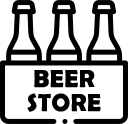
<style>
.page{position:relative;width:128px;height:124px;background:#ffffff}
.page>*{position:absolute;margin:0}
.t1{font:24.7px/24px "BerlinSansFBDemi-Bold";letter-spacing:0.025em;color:#000000;text-transform:uppercase}
</style>
<div class="page">
<p class="t1" style="left:27px;top:70px;width:74px;height:42px;text-align:center">BEER<br>Store</p>
</div>
